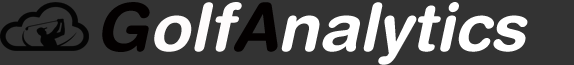
<style>
.page{position:relative;width:574px;height:65px;background:#333333}
.page>*{position:absolute;margin:0}
.t1{font:66.7px "HelveticaRoundedLTStd-BdO";color:#ffffff}
.t2{font:66.7px "HelveticaRoundedLTStd-BdO";color:#030000}
.t3{font:66.7px "HelveticaRoundedLTStd-BdO";color:#fefcfc}
</style>
<div class="page">
<p class="t1" style="left:102px;top:2px;width:426px;height:63px"><span class="t2">G</span><span class="t3">olf</span><span class="t2">A</span>nalytics</p>
</div>
